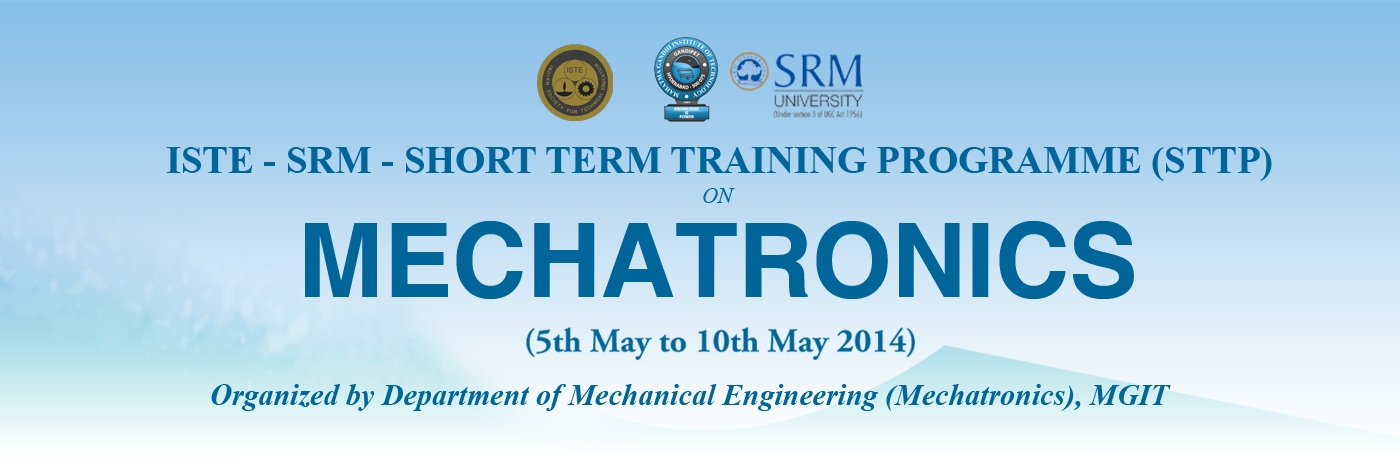
<style>
.page{position:relative;width:1400px;height:460px}
.page>*{position:absolute;margin:0}
.t1{font:38.5px "TimesNewRomanPS-BoldMT";color:#006699}
.t2{font:21.8px "TimesNewRomanPS-ItalicMT";color:#006699}
.t3{font:102.7px "Helvetica-Bold";color:#006699}
.t4{font:30px "TimesNewRomanPS-BoldItalicMT";color:#006699}
</style>
<div class="page">
<p class="t1" style="left:166px;top:147px;width:1106px;height:34px">ISTE - SRM - SHORT TERM TRAINING PROGRAMME (STTP)</p>
<p class="t2" style="left:703px;top:188px;width:32px;height:15px">ON</p>
<p class="t3" style="left:305px;top:221px;width:829px;height:78px">MECHATRONICS</p>
<p class="t4" style="left:211px;top:384px;width:960px;height:27px">Organized by Department of Mechanical Engineering (Mechatronics), MGIT</p>
</div>
